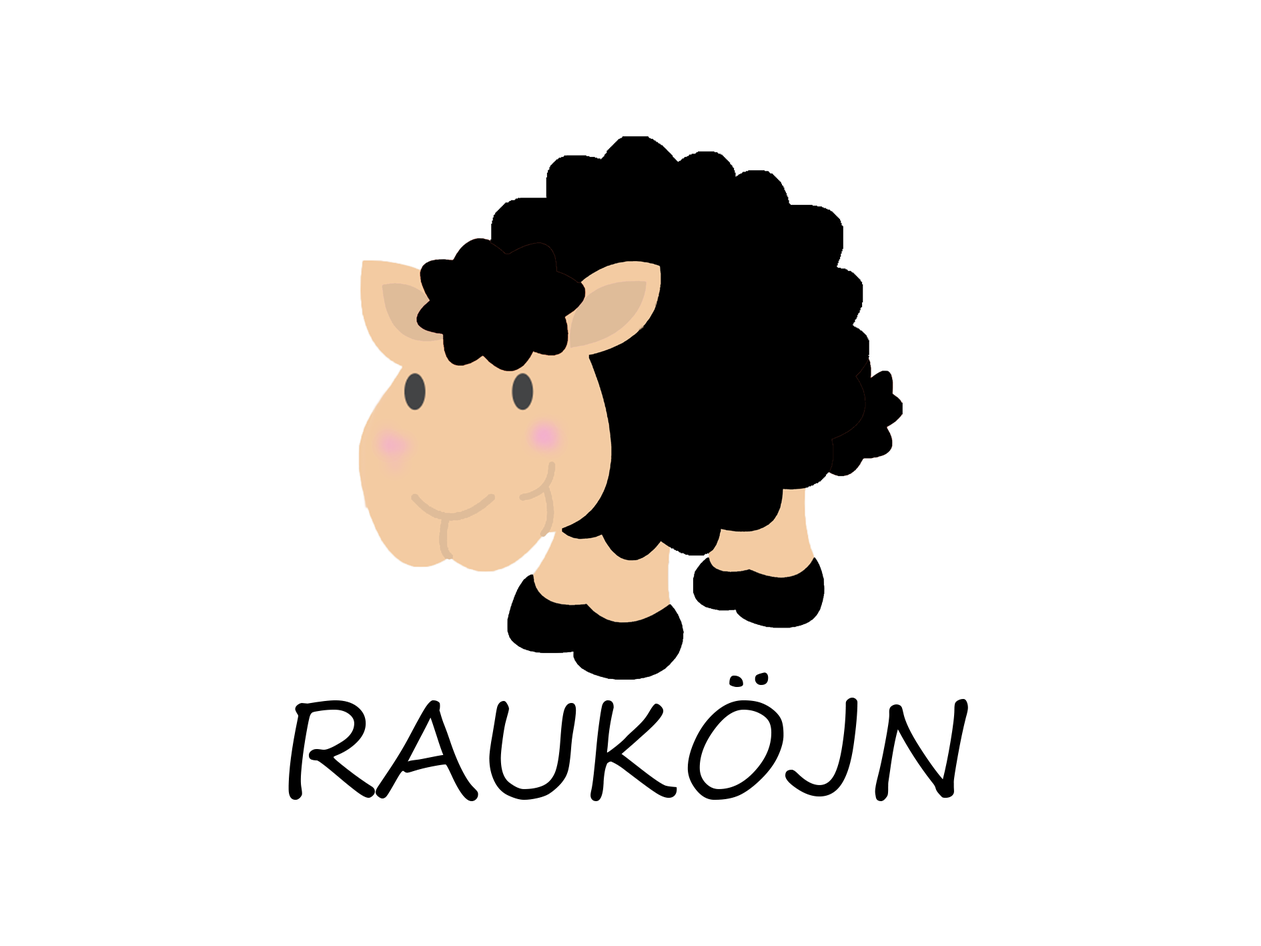
<style>
.page{position:relative;width:1261px;height:946px;background:#ffffff}
.page>*{position:absolute;margin:0}
.t1{font:133.5px "SegoePrint";color:#000000}
</style>
<div class="page">
<p class="t1" style="left:288px;top:672px;width:680px;height:129px">RAUKÖJN</p>
</div>
